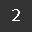
<style>
.page{position:relative;width:32px;height:32px;background:#333333}
.page>*{position:absolute;margin:0}
.t1{font:17.8px "MyriadPro-Regular";color:#ffffff;scale:1.12 1}
</style>
<div class="page">
<p class="t1" style="left:12px;top:9px;width:8px;height:12px">2</p>
</div>
